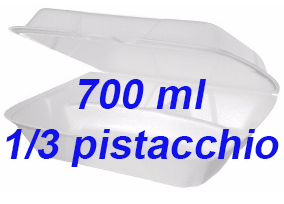
<style>
.page{position:relative;width:284px;height:204px;background:#fefefe}
.page>*{position:absolute;margin:0}
.t1{font:72px "Arial-BoldMT";color:#1111ea;font-style:italic}
</style>
<div class="page">
<p class="t1" style="left:78px;top:79px;width:128px;height:30px">700 ml</p>
<p class="t1" style="left:6px;top:129px;width:273px;height:38px">1/3 pistacchio</p>
</div>
